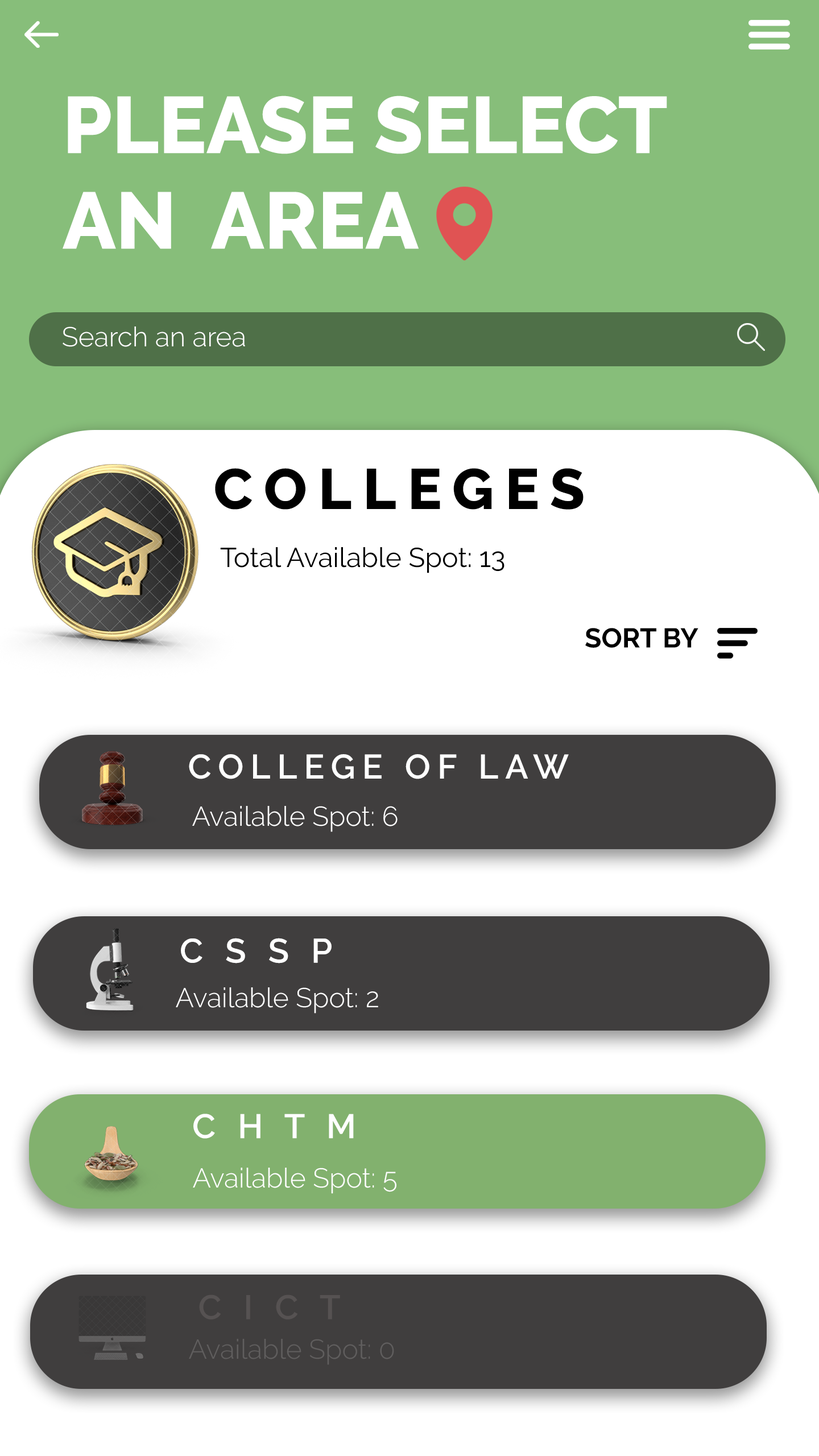
<style>
.page{position:relative;width:819px;height:1456px;background:#ffffff}
.page>*{position:absolute;margin:0}
.t1{font:79.6px "Raleway-ExtraBold";color:#ffffff}
.t2{font:27.3px "Raleway-Light";color:#ffffff}
.t3{font:56.9px "Raleway-ExtraBold";letter-spacing:0.2em;color:#000000}
.t4{font:27.3px "Raleway-Regular";color:#000000}
.t5{font:27.3px "Raleway-Bold";color:#000000}
.t6{font:34.1px "Raleway-SemiBold";letter-spacing:0.2em;color:#ffffff}
.t7{font:34.1px "Raleway-SemiBold";letter-spacing:0.2em;color:#565252}
.t8{font:27.3px "Raleway-Light";color:#605e5e}
</style>
<div class="page">
<p class="t1" style="left:63px;top:96px;width:604px;height:153px">PLEASE SELECT <br>AN  AREA</p>
<p class="t2" style="left:63px;top:326px;width:182px;height:21px">Search an area</p>
<p class="t3" style="left:215px;top:468px;width:369px;height:42px">COLLEGES</p>
<p class="t4" style="left:220px;top:547px;width:284px;height:26px">Total Available Spot: 13</p>
<p class="t5" style="left:585px;top:628px;width:113px;height:20px">SORT BY</p>
<p class="t6" style="left:189px;top:754px;width:380px;height:25px">COLLEGE OF LAW</p>
<p class="t2" style="left:192px;top:806px;width:206px;height:26px">Available Spot: 6</p>
<p class="t6" style="left:181px;top:938px;width:151px;height:25px">C S S P</p>
<p class="t2" style="left:176px;top:987px;width:202px;height:26px">Available Spot: 2</p>
<p class="t6" style="left:193px;top:1114px;width:161px;height:25px">C H T M</p>
<p class="t2" style="left:193px;top:1168px;width:203px;height:26px">Available Spot: 5</p>
<p class="t7" style="left:199px;top:1294px;width:141px;height:25px">C I C T</p>
<p class="t8" style="left:189px;top:1339px;width:205px;height:26px">Available Spot: 0</p>
</div>
